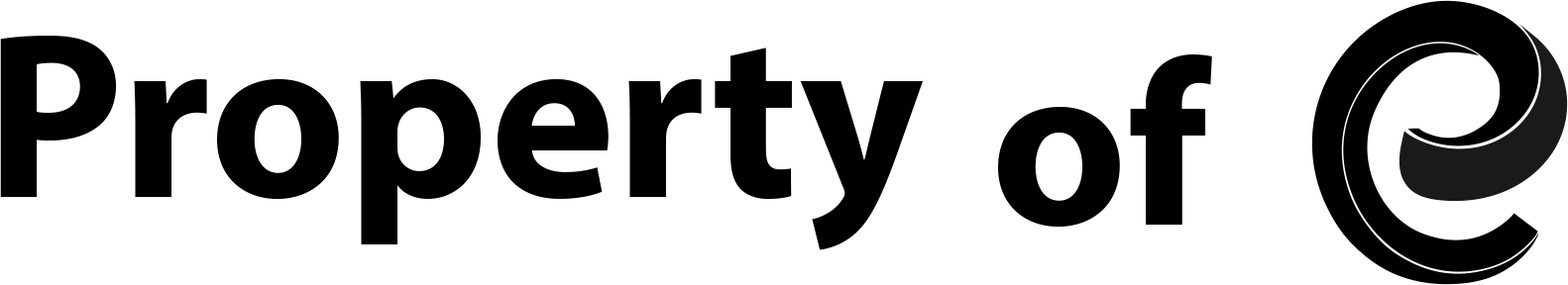
<style>
.page{position:relative;width:1568px;height:285px;background:#ffffff}
.page>*{position:absolute;margin:0}
.t1{font:237.9px "MyriadPro-Bold";color:#000000}
</style>
<div class="page">
<p class="t1" style="left:0px;top:36px;width:923px;height:215px">Property</p>
<p class="t1" style="left:998px;top:55px;width:214px;height:173px">of</p>
</div>
